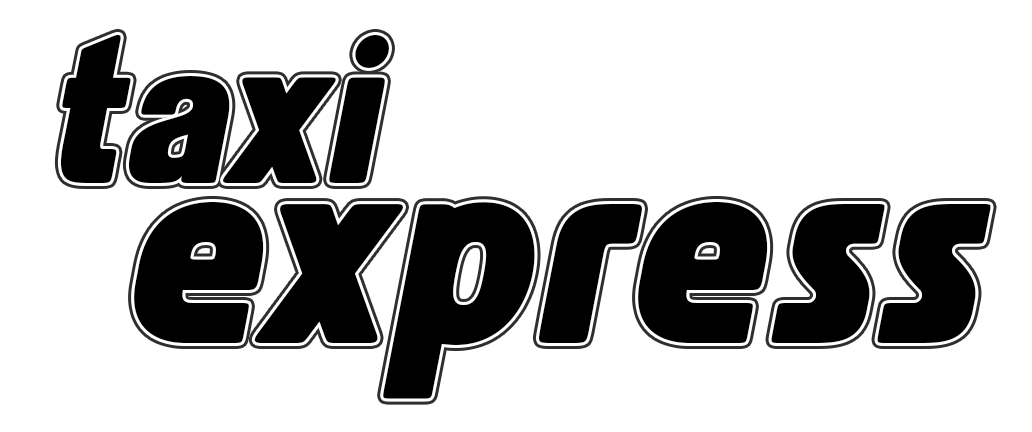
<style>
.page{position:relative;width:1032px;height:432px;background:#ffffff}
.page>*{position:absolute;margin:0}
.t1{font:211.1px "Blezja-Italic";color:#000000}
.t2{font:277.8px "Blezja-Italic";color:#000000}
</style>
<div class="page">
<p class="t1" style="left:60px;top:34px;width:329px;height:149px">taxi</p>
<p class="t2" style="left:134px;top:202px;width:857px;height:197px">express</p>
</div>
